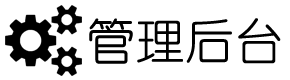
<style>
.page{position:relative;width:290px;height:80px;background:#ffffff}
.page>*{position:absolute;margin:0}
.t1{font:48px "YouYuan";color:#000000;font-weight:bold}
</style>
<div class="page">
<p class="t1" style="left:89px;top:18px;width:192px;height:46px">管理后台</p>
</div>
